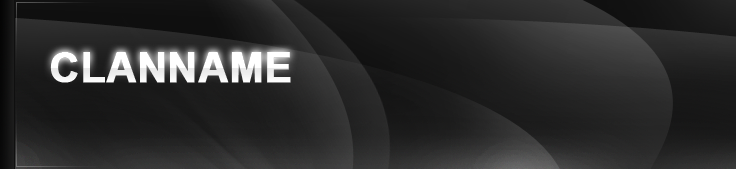
<style>
.page{position:relative;width:736px;height:169px}
.page>*{position:absolute;margin:0}
.t1{font:41px "Arial-BoldMT";color:#ffffff;font-weight:bold}
</style>
<div class="page">
<p class="t1" style="left:50px;top:52px;width:241px;height:31px">CLANNAME</p>
<p class="t1" style="left:50px;top:52px;width:241px;height:31px">CLANNAME</p>
</div>
